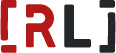
<style>
.page{position:relative;width:116px;height:53px;background:#ffffff}
.page>*{position:absolute;margin:0}
.t1{font:60px "LEIXO-Bold";color:#b41919}
.t2{font:60px "LEIXO-Bold";color:#23272a}
</style>
<div class="page">
<p class="t1" style="left:0px;top:0px;width:116px;height:53px">[R<span class="t2">L]</span></p>
</div>
